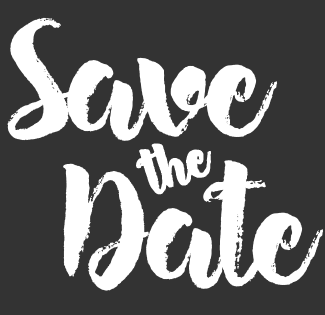
<style>
.page{position:relative;width:325px;height:315px;background:#333333}
.page>*{position:absolute;margin:0}
.t1{font:160px "Hensa-Regular";letter-spacing:-0.035em;color:#ffffff}
.t2{font:60px "Hensa-Regular";letter-spacing:-0.035em;color:#ffffff;font-weight:bold}
</style>
<div class="page">
<p class="t1" style="left:7px;top:17px;width:271px;height:124px">Save</p>
<p class="t2" style="left:136px;top:143px;width:75px;height:52px;rotate:-21deg">the</p>
<p class="t1" style="left:63px;top:160px;width:261px;height:131px">Date</p>
</div>
